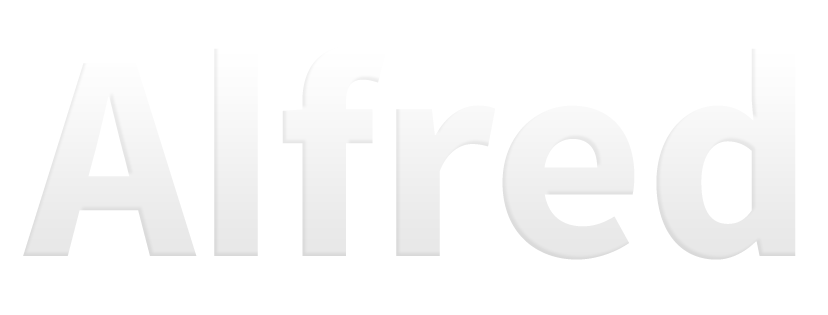
<style>
.page{position:relative;width:828px;height:315px;background:#ffffff}
.page>*{position:absolute;margin:0}
.t1{font:295.7px "SourceSansPro-Bold";color:#f0f0f0}
</style>
<div class="page">
<p class="t1" style="left:23px;top:45px;width:773px;height:215px">Alfred</p>
</div>
